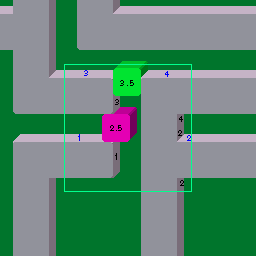
<style>
.page{position:relative;width:256px;height:256px;background:#91929b}
.page>*{position:absolute;margin:0}
.t1{font:8px "AkzidenzGroteskBQ-Reg";letter-spacing:-0.01em;color:#0000fc}
.t2{font:8px "AkzidenzGroteskBQ-Reg";letter-spacing:-0.01em;color:#000000}
</style>
<div class="page">
<p class="t1" style="left:84px;top:70px;width:4px;height:6px">3</p>
<p class="t1" style="left:165px;top:71px;width:4px;height:6px">4</p>
<p class="t2" style="left:120px;top:80px;width:14px;height:6px">3 . 5</p>
<p class="t2" style="left:115px;top:99px;width:4px;height:6px">3</p>
<p class="t2" style="left:110px;top:125px;width:12px;height:6px">2 .5</p>
<p class="t2" style="left:179px;top:116px;width:4px;height:6px">4</p>
<p class="t1" style="left:78px;top:134px;width:2px;height:7px">1</p>
<p class="t2" style="left:178px;top:130px;width:4px;height:6px">2</p>
<p class="t1" style="left:187px;top:135px;width:4px;height:6px">2</p>
<p class="t2" style="left:115px;top:153px;width:2px;height:7px">1</p>
<p class="t2" style="left:180px;top:180px;width:4px;height:6px">2</p>
</div>
